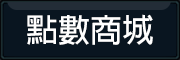
<style>
.page{position:relative;width:180px;height:60px;background:#091520}
.page>*{position:absolute;margin:0}
.t1{font:32px "AdobeFanHeitiStd-Bold";color:#ffffff}
</style>
<div class="page">
<p class="t1" style="left:27px;top:14px;width:126px;height:31px">點數商城</p>
</div>
